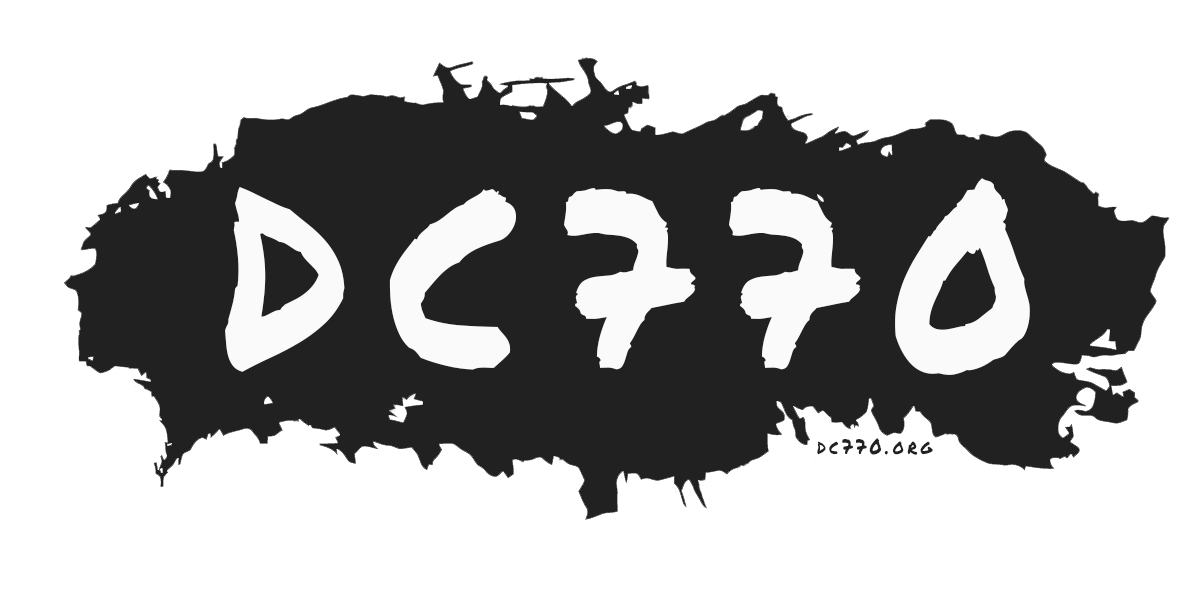
<style>
.page{position:relative;width:1200px;height:600px;background:#ffffff}
.page>*{position:absolute;margin:0}
.t1{font:250px "PermanentMarker";letter-spacing:0.2em;color:#fafafa;scale:0.85 1}
.t2{font:20.8px "PermanentMarker";letter-spacing:0.2em;color:#212121;scale:0.85 1}
</style>
<div class="page">
<p class="t1" style="left:225px;top:178px;width:805px;height:197px">DC770</p>
<p class="t2" style="left:817px;top:438px;width:116px;height:17px">dc770.org</p>
</div>
